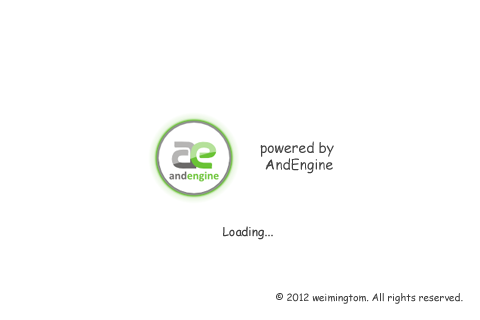
<style>
.page{position:relative;width:480px;height:320px;background:#ffffff}
.page>*{position:absolute;margin:0}
.t1{font:14px "ComicSansMS";color:#434343}
.t2{font:12px "ComicSansMS";color:#434343}
.t3{font:10px "ComicSansMS";color:#434343}
</style>
<div class="page">
<p class="t1" style="left:260px;top:141px;width:74px;height:33px;text-align:center">powered by <br>AndEngine</p>
<p class="t2" style="left:223px;top:226px;width:50px;height:14px">Loading...</p>
<p class="t3" style="left:276px;top:293px;width:187px;height:11px">© 2012 weimingtom. All rights reserved.</p>
</div>
